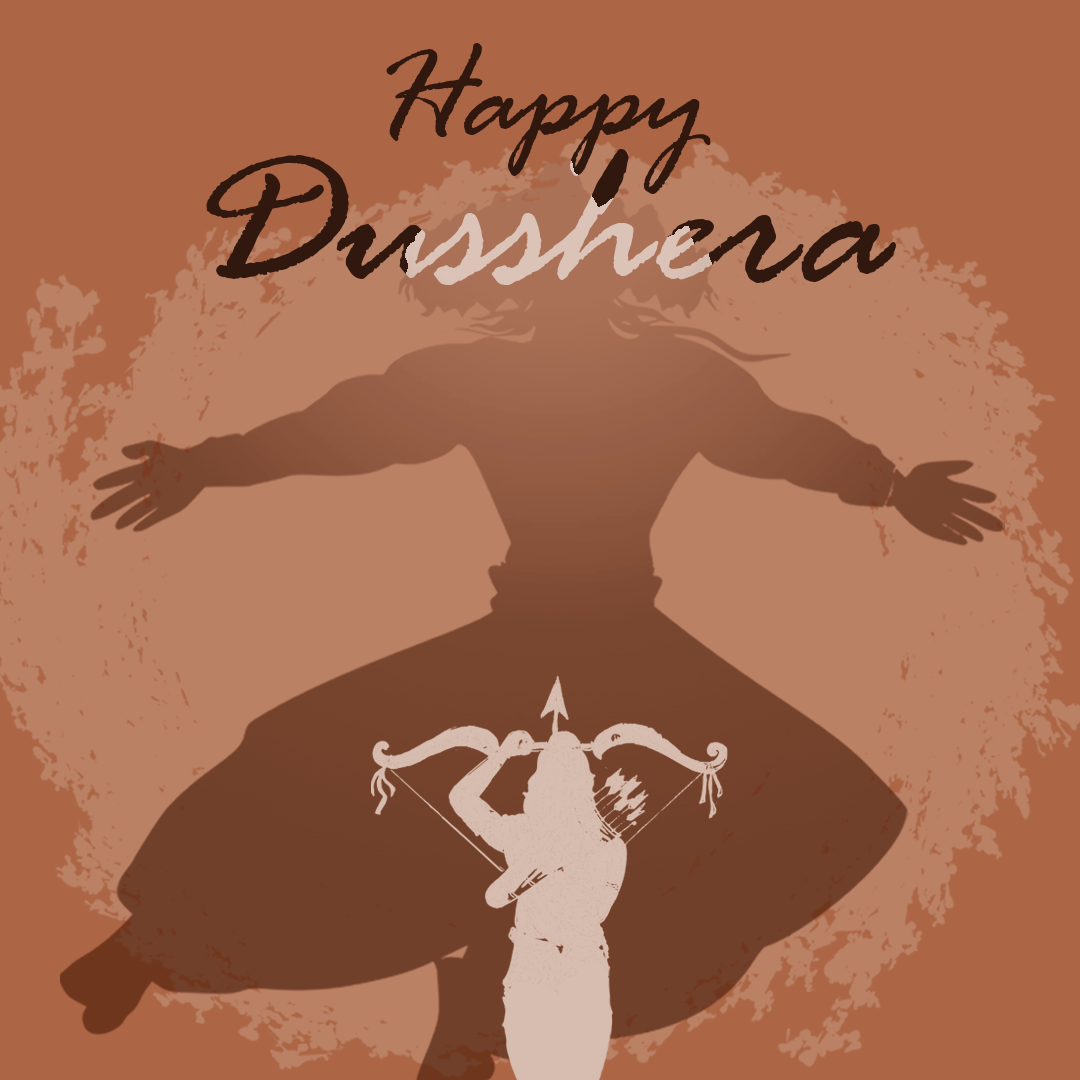
<style>
.page{position:relative;width:1080px;height:1080px;background:#ac6646}
.page>*{position:absolute;margin:0}
.t1{font:216.7px/150px "RageItalic";color:#31180f}
.t2{font:137.5px/150px "RageItalic";color:#31180f}
</style>
<div class="page">
<p class="t1" style="left:206px;top:43px;width:690px;height:242px;text-align:center"><span class="t2">Happy<br></span>Dusshera</p>
</div>
